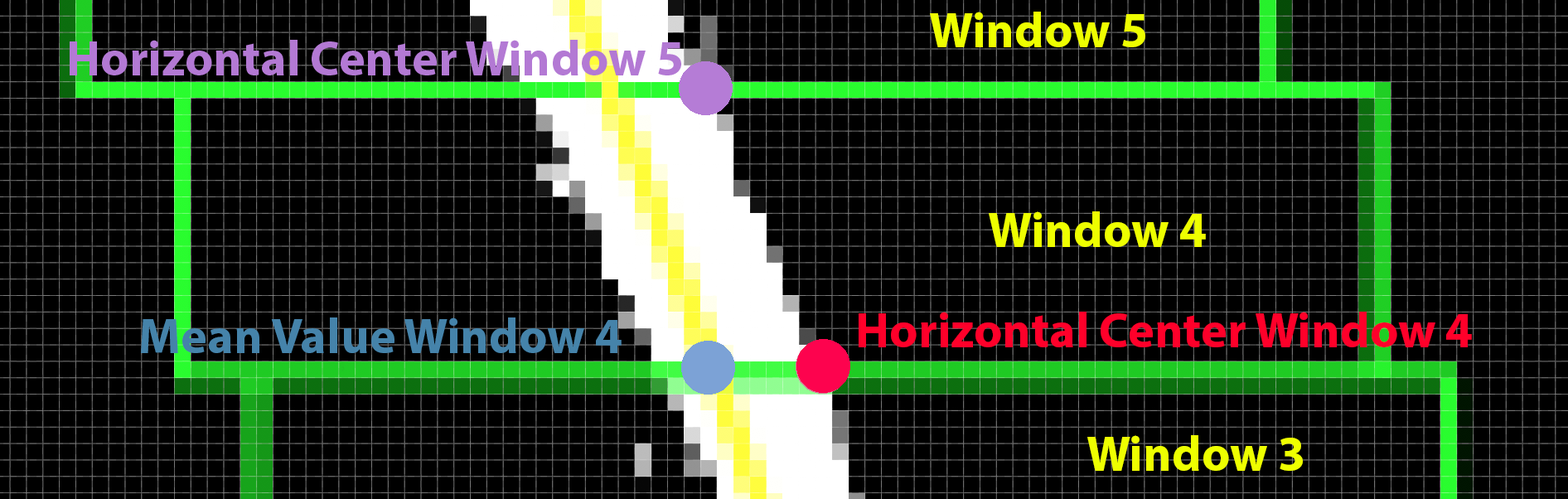
<style>
.page{position:relative;width:1568px;height:499px;background:#000000}
.page>*{position:absolute;margin:0}
.t1{font:49.7px "MyriadPro-Bold";color:#eeff00}
.t2{font:49.7px "MyriadPro-Bold";color:#4583aa}
.t3{font:49.7px "MyriadPro-Bold";color:#ff002a}
</style>
<div class="page">
<p class="t1" style="left:930px;top:12px;width:215px;height:35px">Window 5</p>
<p class="t1" style="left:989px;top:211px;width:217px;height:36px">Window 4</p>
<p class="t2" style="left:141px;top:317px;width:481px;height:36px">Mean Value Window 4</p>
<p class="t3" style="left:859px;top:312px;width:613px;height:35px">Horizontal Center Window 4</p>
<p class="t1" style="left:1087px;top:435px;width:216px;height:36px">Window 3</p>
</div>
